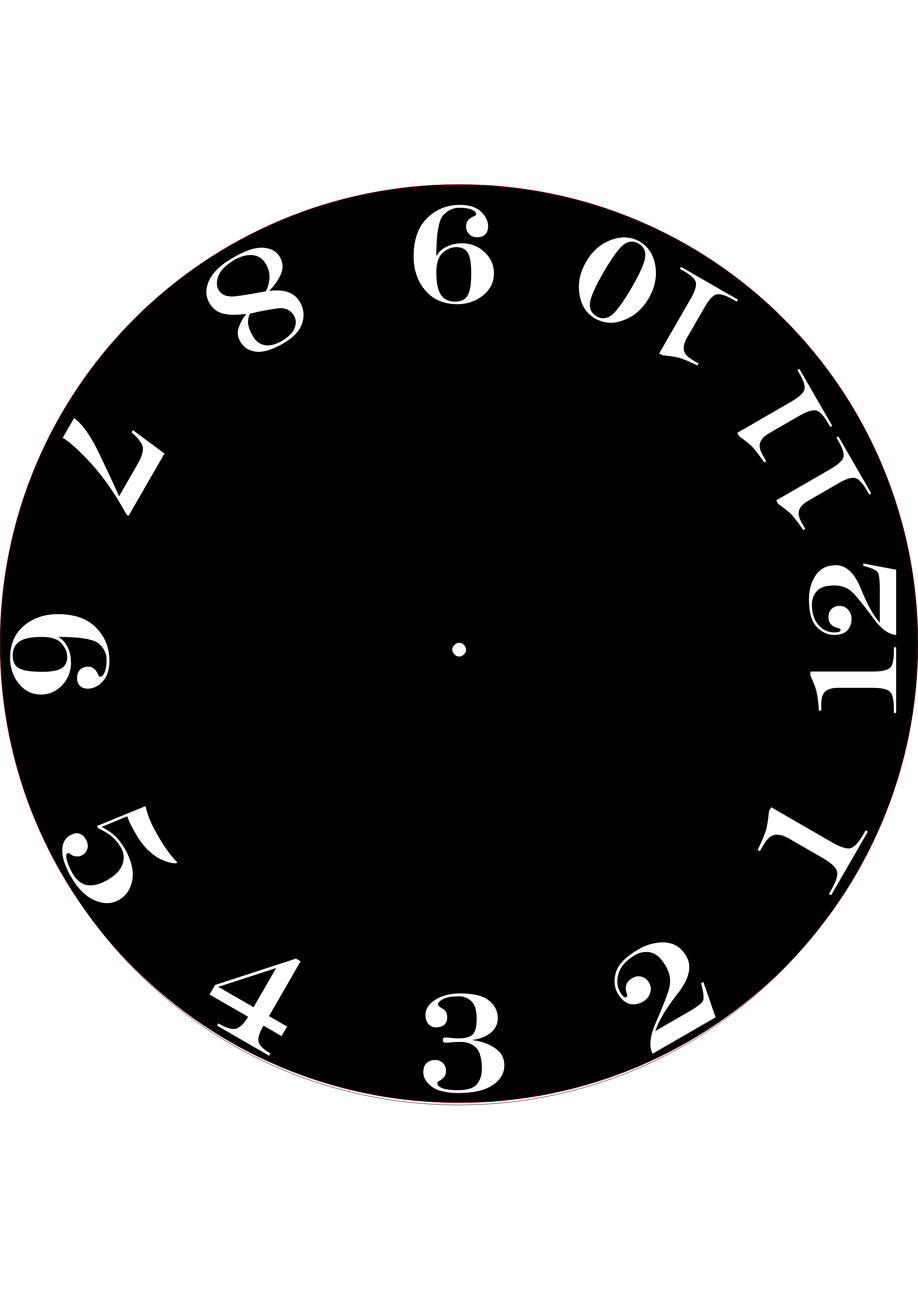
<style>
.page{position:relative;width:918px;height:1299px;background:#000000}
.page>*{position:absolute;margin:0}
.t1{font:140.7px "Engry";color:#ffffff}
.t2{font:125.9px "Engry";color:#ffffff}
</style>
<div class="page">
<p class="t1" style="left:414px;top:205px;width:80px;height:99px;rotate:-180deg">9</p>
<p class="t2" style="left:577px;top:234px;width:161px;height:131px;rotate:-150deg">10</p>
<p class="t1" style="left:203px;top:247px;width:103px;height:106px;rotate:150deg">8</p>
<p class="t2" style="left:737px;top:369px;width:135px;height:161px;rotate:-120deg">11</p>
<p class="t1" style="left:63px;top:418px;width:102px;height:98px;rotate:120deg">7</p>
<p class="t2" style="left:809px;top:563px;width:87px;height:150px;rotate:-90deg">12</p>
<p class="t1" style="left:10px;top:614px;width:100px;height:81px;rotate:90deg">6</p>
<p class="t1" style="left:62px;top:806px;width:116px;height:100px;rotate:60deg">5</p>
<p class="t1" style="left:757px;top:807px;width:111px;height:88px;rotate:-60deg">1</p>
<p class="t1" style="left:612px;top:941px;width:104px;height:113px;rotate:-30deg">2</p>
<p class="t1" style="left:210px;top:958px;width:91px;height:98px;rotate:30deg">4</p>
<p class="t1" style="left:423px;top:993px;width:82px;height:100px">3</p>
</div>
